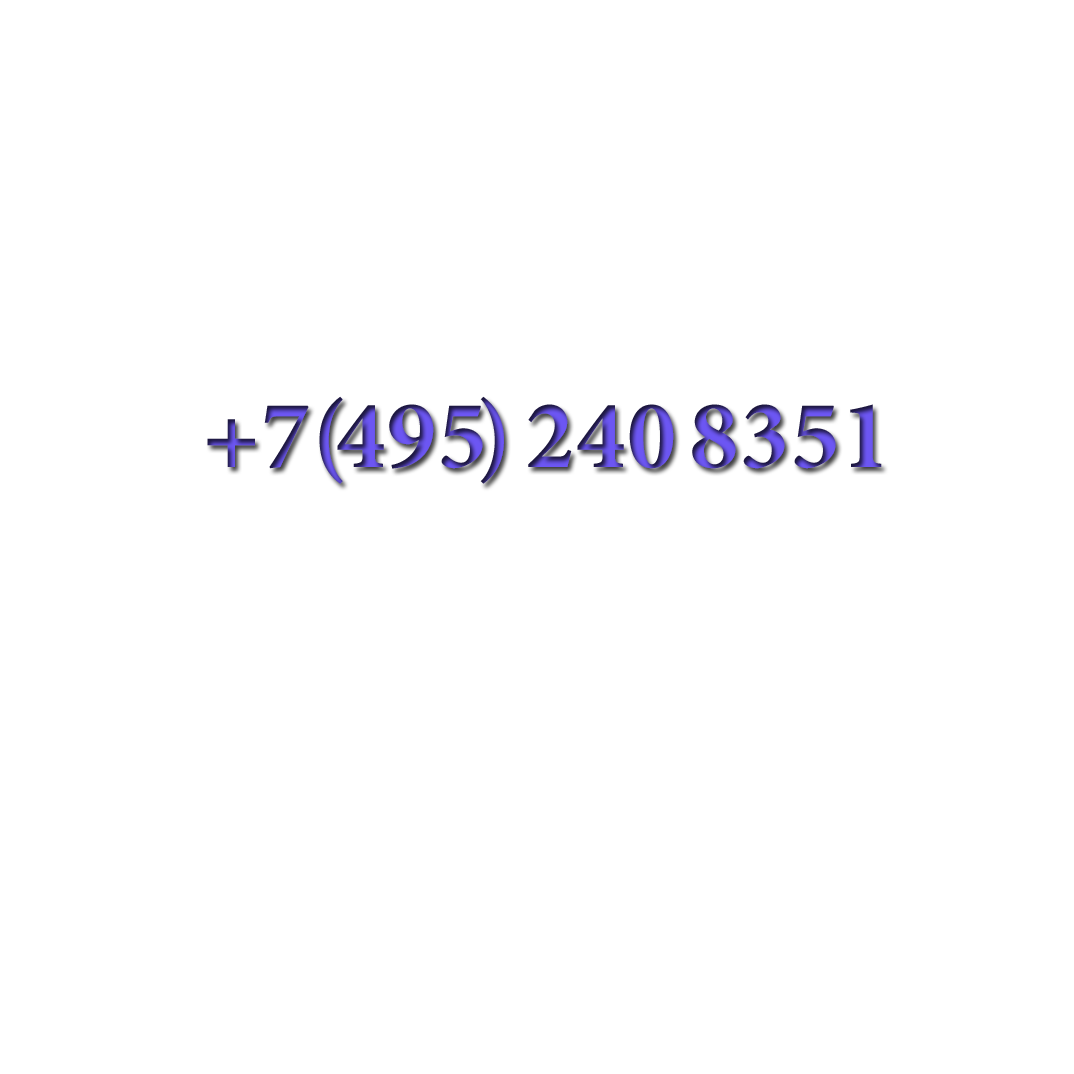
<style>
.page{position:relative;width:1074px;height:1074px;background:#ffffff}
.page>*{position:absolute;margin:0}
.t1{font:12px/1146.2px "MinionPro-Bold";letter-spacing:-0.1em}
</style>
<div class="page">
<p class="t1" style="left:207px;top:396px;width:675px;height:88px">+ 7 (4 9 5)  2 4 0  8 3 5 1</p>
</div>
